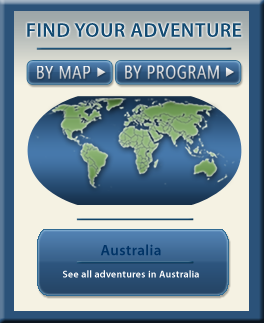
<style>
.page{position:relative;width:264px;height:323px;background:#f5f2e3}
.page>*{position:absolute;margin:0}
.t1{font:18.6px "SegoeCondensed";letter-spacing:0.025em;color:#f3f3f3}
.t2{font:18.6px "SegoeCondensed";letter-spacing:0.025em;color:#f7f8f9}
.t3{font:15.1px "MyriadPro-Semibold";letter-spacing:0.025em;color:#003366}
.t4{font:10px "MyriadPro-Semibold";letter-spacing:0.025em;color:#ffffff}
</style>
<div class="page">
<p class="t1" style="left:125px;top:65px;width:94px;height:14px">BY PROGRAM</p>
<p class="t2" style="left:37px;top:66px;width:53px;height:13px">BY MAP</p>
<p class="t3" style="left:100px;top:244px;width:61px;height:12px">Australia</p>
<p class="t4" style="left:63px;top:270px;width:136px;height:8px">See all adventures in Australia</p>
</div>
